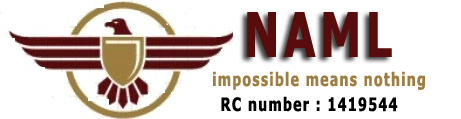
<style>
.page{position:relative;width:461px;height:119px;background:#ffffff}
.page>*{position:absolute;margin:0}
.t1{font:61.8px "Tahoma-Bold";letter-spacing:0.102em;color:#580c0c;scale:0.74 1}
.t2{font:18.5px "Tahoma-Bold";letter-spacing:0.102em;color:#9d7d40;scale:0.74 1}
.t3{font:18.5px "Tahoma-Bold";letter-spacing:0.102em;color:#000000;scale:0.74 1}
</style>
<div class="page">
<p class="t1" style="left:247px;top:12px;width:145px;height:45px">NAML</p>
<p class="t2" style="left:213px;top:71px;width:212px;height:19px">impossible means nothing</p>
<p class="t3" style="left:221px;top:96px;width:177px;height:16px">RC number : 1419544</p>
</div>
